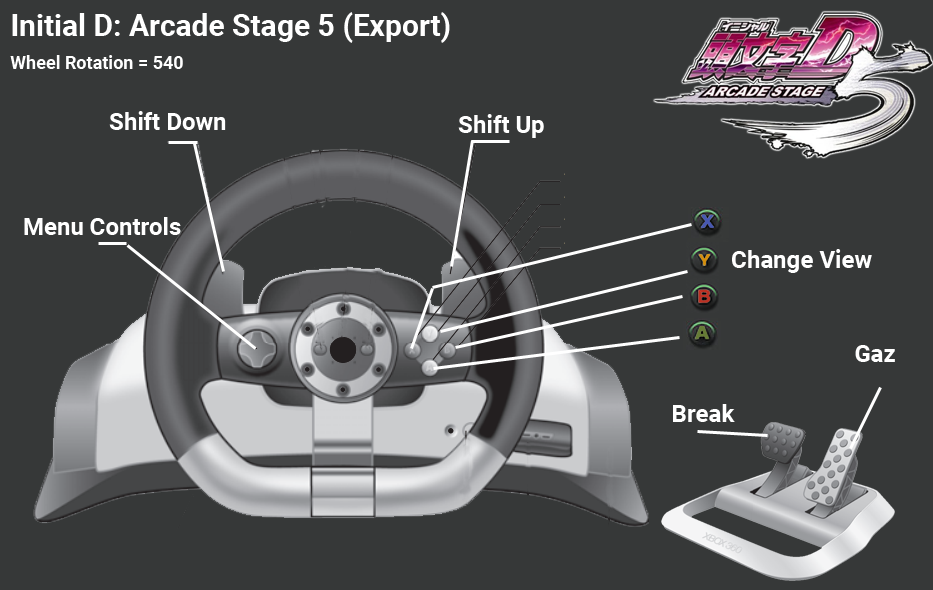
<style>
.page{position:relative;width:933px;height:590px;background:#363838}
.page>*{position:absolute;margin:0}
.t1{font:30px "Roboto-Bold";color:#ffffff}
.t2{font:18px "Roboto-Bold";color:#ffffff}
.t3{font:24px "Roboto-Bold";color:#ffffff}
</style>
<div class="page">
<p class="t1" style="left:12px;top:12px;width:438px;height:31px">Initial D: Arcade Stage 5 (Export)</p>
<p class="t2" style="left:10px;top:55px;width:173px;height:14px">Wheel Rotation = 540</p>
<p class="t3" style="left:109px;top:111px;width:117px;height:19px">Shift Down</p>
<p class="t3" style="left:458px;top:114px;width:86px;height:24px">Shift Up</p>
<p class="t3" style="left:24px;top:217px;width:157px;height:18px">Menu Controls</p>
<p class="t3" style="left:732px;top:249px;width:140px;height:24px">Change View</p>
<p class="t3" style="left:855px;top:345px;width:40px;height:17px">Gaz</p>
<p class="t3" style="left:673px;top:404px;width:62px;height:18px">Break</p>
</div>
